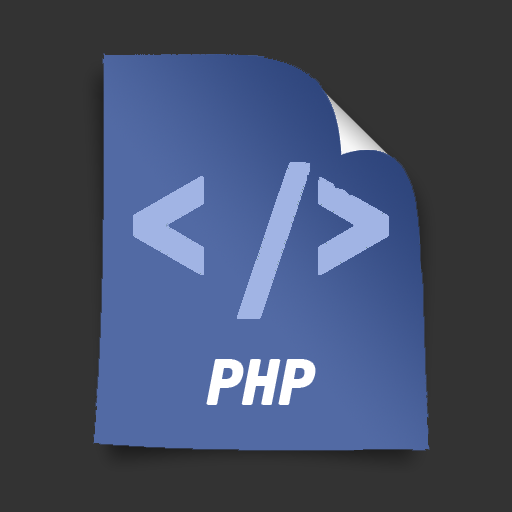
<style>
.page{position:relative;width:512px;height:512px;background:#333333}
.page>*{position:absolute;margin:0}
.t1{font:60px "Menlo-BoldItalic";color:#ffffff}
</style>
<div class="page">
<p class="t1" style="left:207px;top:360px;width:108px;height:44px">PHP</p>
</div>
